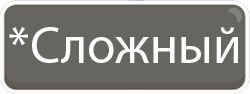
<style>
.page{position:relative;width:250px;height:94px;background:#66655f}
.page>*{position:absolute;margin:0}
.t1{font:52px "MyriadPro-Regular";color:#fdfdfd}
</style>
<div class="page">
<p class="t1" style="left:9px;top:27px;width:229px;height:36px">*Сложный</p>
</div>
